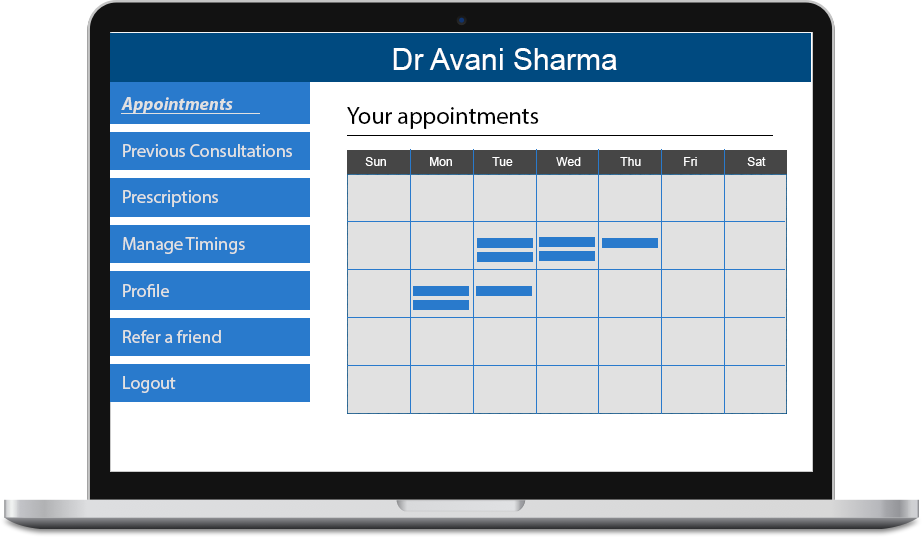
<style>
.page{position:relative;width:922px;height:537px;background:#ffffff}
.page>*{position:absolute;margin:0}
.t1{font:30px "ArialMT";color:#ffffff}
.t2{font:18px "MyriadPro-BoldIt";color:#e1e1e1}
.t3{font:24px "MyriadPro-Regular";color:#000000}
.t4{font:18px "MyriadPro-Regular";color:#e1e1e1}
.t5{font:12px "ArialMT";color:#ffffff}
</style>
<div class="page">
<p class="t1" style="left:393px;top:48px;width:224px;height:22px">Dr Avani Sharma</p>
<p class="t2" style="left:121px;top:97px;width:112px;height:17px">Appointments</p>
<p class="t3" style="left:347px;top:107px;width:192px;height:22px">Your appointments</p>
<p class="t4" style="left:123px;top:144px;width:169px;height:13px">Previous Consultations</p>
<p class="t5" style="left:365px;top:157px;width:21px;height:9px">Sun</p>
<p class="t5" style="left:430px;top:157px;width:22px;height:9px">Mon</p>
<p class="t5" style="left:492px;top:157px;width:21px;height:9px">Tue</p>
<p class="t5" style="left:556px;top:157px;width:25px;height:9px">Wed</p>
<p class="t5" style="left:620px;top:157px;width:21px;height:9px">Thu</p>
<p class="t5" style="left:684px;top:157px;width:13px;height:9px">Fri</p>
<p class="t5" style="left:747px;top:157px;width:19px;height:9px">Sat</p>
<p class="t4" style="left:123px;top:190px;width:95px;height:17px">Prescriptions</p>
<p class="t4" style="left:123px;top:237px;width:122px;height:17px">Manage Timings</p>
<p class="t4" style="left:123px;top:284px;width:46px;height:13px">Profile</p>
<p class="t4" style="left:123px;top:330px;width:98px;height:13px">Refer a friend</p>
<p class="t4" style="left:123px;top:376px;width:53px;height:17px">Logout</p>
</div>
